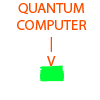
<style>
.page{position:relative;width:100px;height:100px;background:#ffffff}
.page>*{position:absolute;margin:0}
.t1{font:14.7px "MyriadPro-Regular";color:#fb4d00}
</style>
<div class="page">
<p class="t1" style="left:17px;top:3px;width:70px;height:63px;text-align:center">QUANTUM<br>COMPUTER<br>|<br>V</p>
</div>
